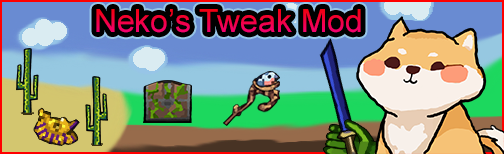
<style>
.page{position:relative;width:504px;height:154px}
.page>*{position:absolute;margin:0}
.t1{font:32px "ArialMT"}
</style>
<div class="page">
<p class="t1" style="left:96px;top:9px;width:265px;height:24px">Neko’s Tweak Mod</p>
<p class="t1" style="left:96px;top:9px;width:265px;height:24px">Neko’s Tweak Mod</p>
<p class="t1" style="left:96px;top:9px;width:265px;height:24px">Neko’s Tweak Mod</p>
</div>
